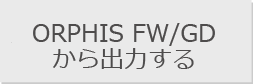
<style>
.page{position:relative;width:253px;height:84px;background:#eaeaea}
.page>*{position:absolute;margin:0}
.t1{font:24px/26px "Meiryo";color:#4e4c4c}
</style>
<div class="page">
<p class="t1" style="left:33px;top:23px;width:182px;height:46px;text-align:center">ORPHIS FW/GD<br>から出力する</p>
</div>
